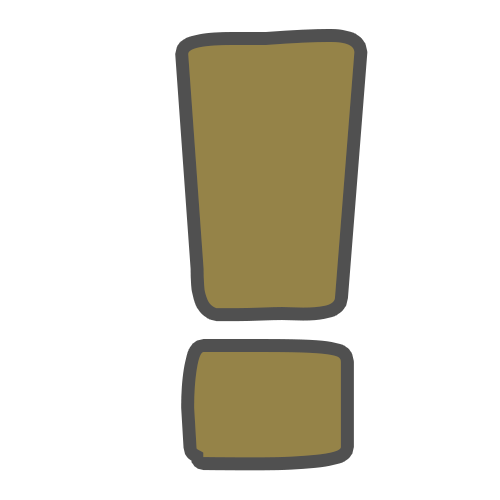
<style>
.page{position:relative;width:500px;height:500px;background:#ffffff}
.page>*{position:absolute;margin:0}
.t1{font:552.1px "BowlbyOneSC-Regular";color:#958348}
</style>
<div class="page">
<p class="t1" style="left:188px;top:42px;width:167px;height:416px">!</p>
</div>
